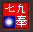
<style>
.page{position:relative;width:33px;height:32px;background:#f20000}
.page>*{position:absolute;margin:0}
.t1{font:10.4px "SimSun";color:#ffffff}
.t2{font:11.7px "SimSun";color:#ffffff}
</style>
<div class="page">
<p class="t1" style="left:5px;top:4px;width:20px;height:9px">七九</p>
<p class="t2" style="left:16px;top:15px;width:11px;height:12px">奉</p>
</div>
